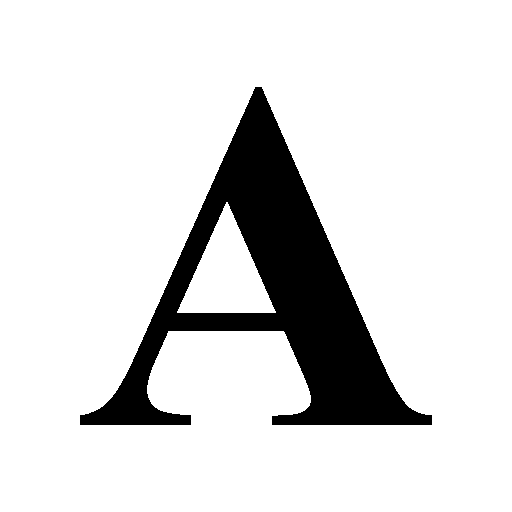
<style>
.page{position:relative;width:512px;height:512px;background:#ffffff}
.page>*{position:absolute;margin:0}
.t1{font:500px "TimesNewRomanPS-BoldMT";letter-spacing:-0.096em;color:#000000}
</style>
<div class="page">
<p class="t1" style="left:80px;top:87px;width:352px;height:338px">A</p>
</div>
